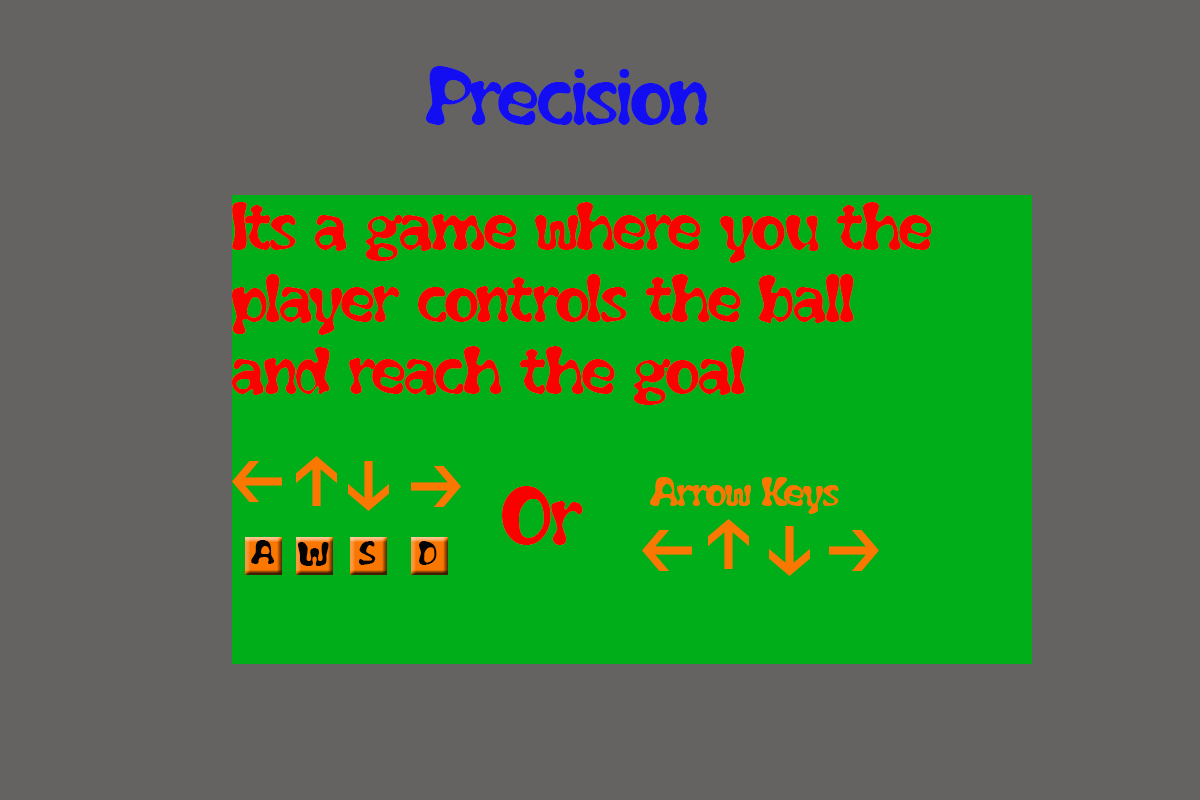
<style>
.page{position:relative;width:1200px;height:800px;background:#656362}
.page>*{position:absolute;margin:0}
.t1{font:72px "Flubber";color:#130df2}
.t2{font:60px "Flubber";color:#fa0202}
.t3{font:72px "Flubber";color:#fb0000}
.t4{font:36px "Flubber";color:#fb7600}
.t5{font:30px "Flubber";color:#030303}
</style>
<div class="page">
<p class="t1" style="left:426px;top:66px;width:282px;height:59px">Precision</p>
<p class="t2" style="left:231px;top:202px;width:701px;height:203px">Its a game where you the player controls the ball and reach the goal</p>
<p class="t3" style="left:502px;top:486px;width:81px;height:59px">Or</p>
<p class="t4" style="left:650px;top:477px;width:189px;height:37px">Arrow Keys</p>
<p class="t5" style="left:251px;top:540px;width:23px;height:24px">A</p>
<p class="t5" style="left:298px;top:542px;width:31px;height:24px">W</p>
<p class="t5" style="left:358px;top:541px;width:18px;height:24px">S</p>
<p class="t5" style="left:419px;top:541px;width:18px;height:24px">D</p>
</div>
